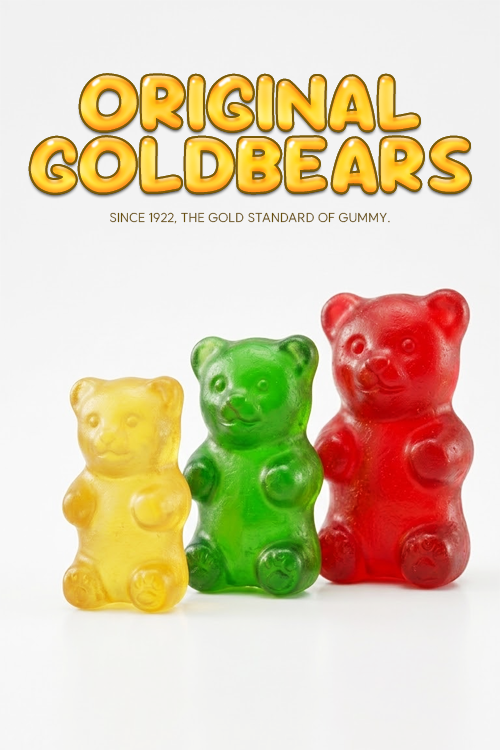
<style>
.page{position:relative;width:500px;height:750px}
.page>*{position:absolute;margin:0}
.t1{font:83.3px/62.5px "SourGummy-ExtraBold";letter-spacing:0.01em;text-transform:uppercase}
.t2{font:12.5px "SUIT-Regular";color:#684f0b;text-transform:uppercase}
</style>
<div class="page">
<p class="t1" style="left:30px;top:75px;width:440px;height:118px;text-align:center">Original<br>Goldbears</p>
<p class="t1" style="left:30px;top:75px;width:440px;height:118px;text-align:center">Original<br>Goldbears</p>
<p class="t2" style="left:110px;top:212px;width:280px;height:12px">Since 1922, the gold standard of gummy.</p>
</div>
